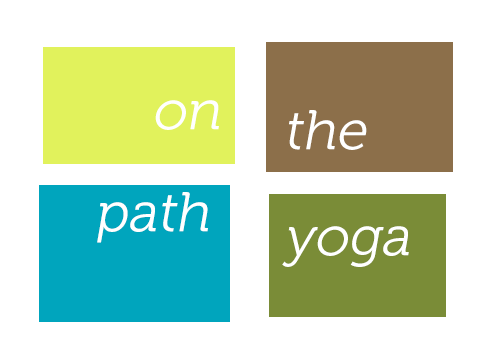
<style>
.page{position:relative;width:504px;height:360px;background:#ffffff}
.page>*{position:absolute;margin:0}
.t1{font:56px "Museo-300";color:#ffffff;font-style:italic}
</style>
<div class="page">
<p class="t1" style="left:155px;top:100px;width:64px;height:30px">on</p>
<p class="t1" style="left:289px;top:110px;width:78px;height:40px">the</p>
<p class="t1" style="left:97px;top:192px;width:111px;height:51px">path</p>
<p class="t1" style="left:282px;top:226px;width:127px;height:41px">yoga</p>
</div>
